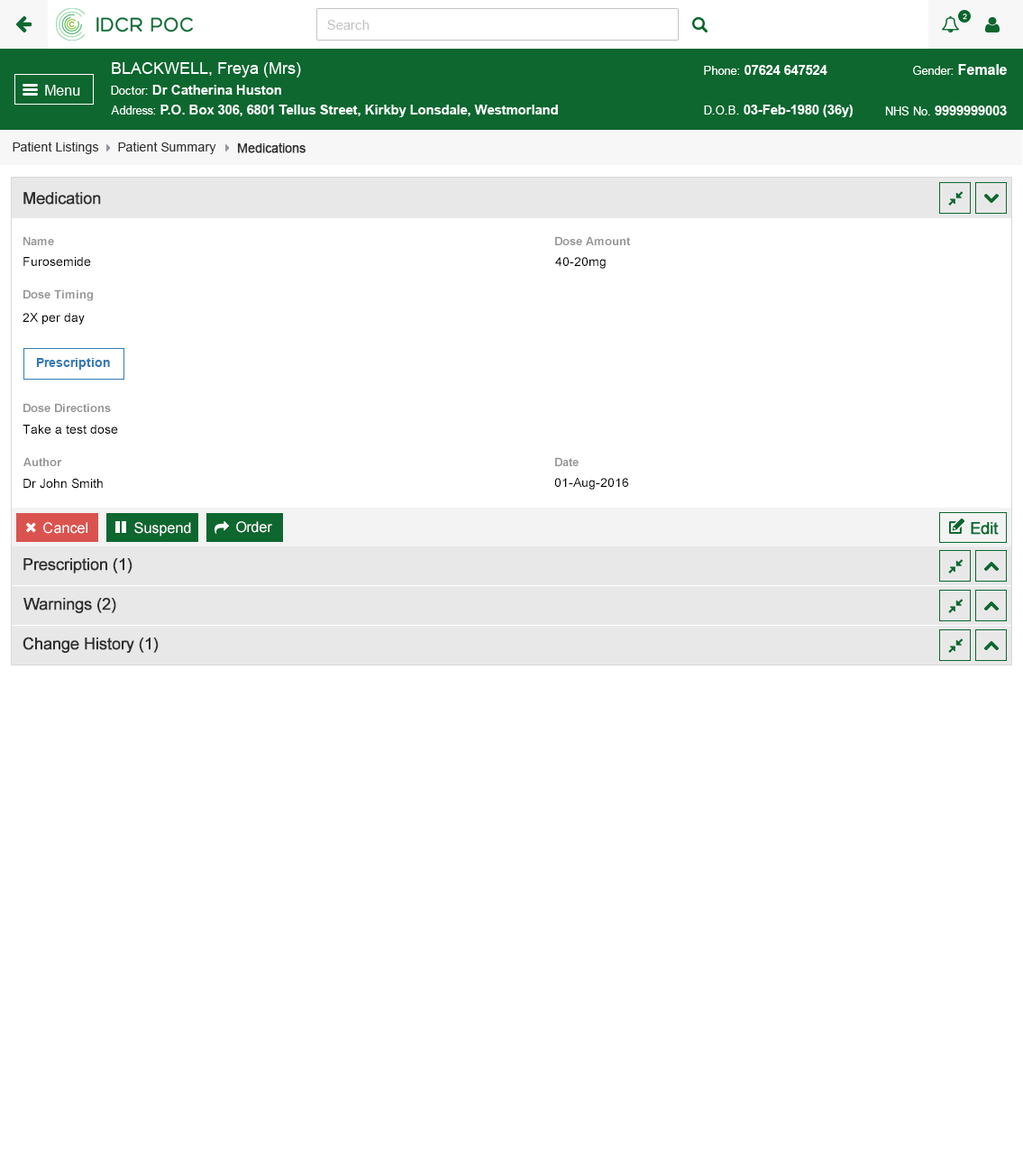
<style>
.page{position:relative;width:1023px;height:1165px;background:#ffffff}
.page>*{position:absolute;margin:0}
.t1{font:12.6px "ArialMT";color:#313131}
.t2{font:12.6px "ArialMT";color:#313131;font-weight:bold}
.t3{font:16.2px "ArialMT";color:#303030;font-weight:bold}
.t4{font:11.7px "Arial-BoldMT";color:#959595}
.t5{font:12.6px "ArialMT";color:#000000}
.t6{font:12.6px "Arial-BoldMT";color:#337ab7}
.t7{font:14.4px "ArialMT";color:#ffffff}
</style>
<div class="page">
<p class="t1" style="left:13px;top:142px;width:86px;height:12px">Patient Listings</p>
<p class="t1" style="left:118px;top:142px;width:98px;height:12px">Patient Summary</p>
<p class="t2" style="left:237px;top:142px;width:69px;height:11px">Medications</p>
<p class="t3" style="left:23px;top:192px;width:78px;height:13px">Medication</p>
<p class="t4" style="left:23px;top:236px;width:31px;height:9px">Name</p>
<p class="t4" style="left:555px;top:236px;width:76px;height:9px">Dose Amount</p>
<p class="t5" style="left:23px;top:257px;width:68px;height:9px">Furosemide</p>
<p class="t5" style="left:555px;top:257px;width:51px;height:12px">40-20mg</p>
<p class="t4" style="left:23px;top:289px;width:70px;height:12px">Dose Timing</p>
<p class="t5" style="left:23px;top:313px;width:62px;height:12px">2X per day</p>
<p class="t6" style="left:36px;top:358px;width:74px;height:12px">Prescription</p>
<p class="t4" style="left:23px;top:403px;width:88px;height:9px">Dose Directions</p>
<p class="t5" style="left:23px;top:425px;width:95px;height:9px">Take a test dose</p>
<p class="t4" style="left:23px;top:457px;width:39px;height:9px">Author</p>
<p class="t4" style="left:555px;top:457px;width:24px;height:9px">Date</p>
<p class="t5" style="left:23px;top:478px;width:80px;height:11px">Dr John Smith</p>
<p class="t5" style="left:555px;top:478px;width:74px;height:12px">01-Aug-2016</p>
<p class="t7" style="left:236px;top:521px;width:36px;height:12px">Order</p>
<p class="t7" style="left:43px;top:522px;width:44px;height:12px">Cancel</p>
<p class="t7" style="left:134px;top:522px;width:57px;height:15px">Suspend</p>
<p class="t3" style="left:23px;top:558px;width:110px;height:16px">Prescription (1)</p>
<p class="t3" style="left:23px;top:598px;width:93px;height:15px">Warnings (2)</p>
<p class="t3" style="left:23px;top:637px;width:136px;height:16px">Change History (1)</p>
</div>
